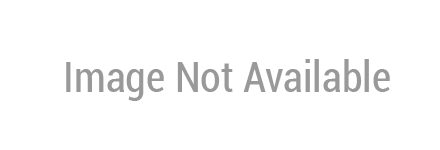
<style>
.page{position:relative;width:440px;height:150px;background:#ffffff}
.page>*{position:absolute;margin:0}
.t1{font:42px "Roboto-Condensed";color:#999999}
</style>
<div class="page">
<p class="t1" style="left:66px;top:59px;width:324px;height:42px">Image Not Available</p>
</div>
